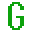
<style>
.page{position:relative;width:32px;height:32px;background:#ffffff}
.page>*{position:absolute;margin:0}
.t1{font:36px "Terminal";color:#0da20d}
</style>
<div class="page">
<p class="t1" style="left:8px;top:2px;width:16px;height:28px">G</p>
</div>
